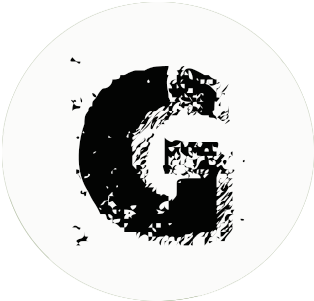
<style>
.page{position:relative;width:314px;height:301px;background:#fbfbfa}
.page>*{position:absolute;margin:0}
.t1{font:337.5px "WGOfConcrete";color:#030403;scale:0.89 1}
</style>
<div class="page">
<p class="t1" style="left:70px;top:57px;width:175px;height:189px">G</p>
</div>
